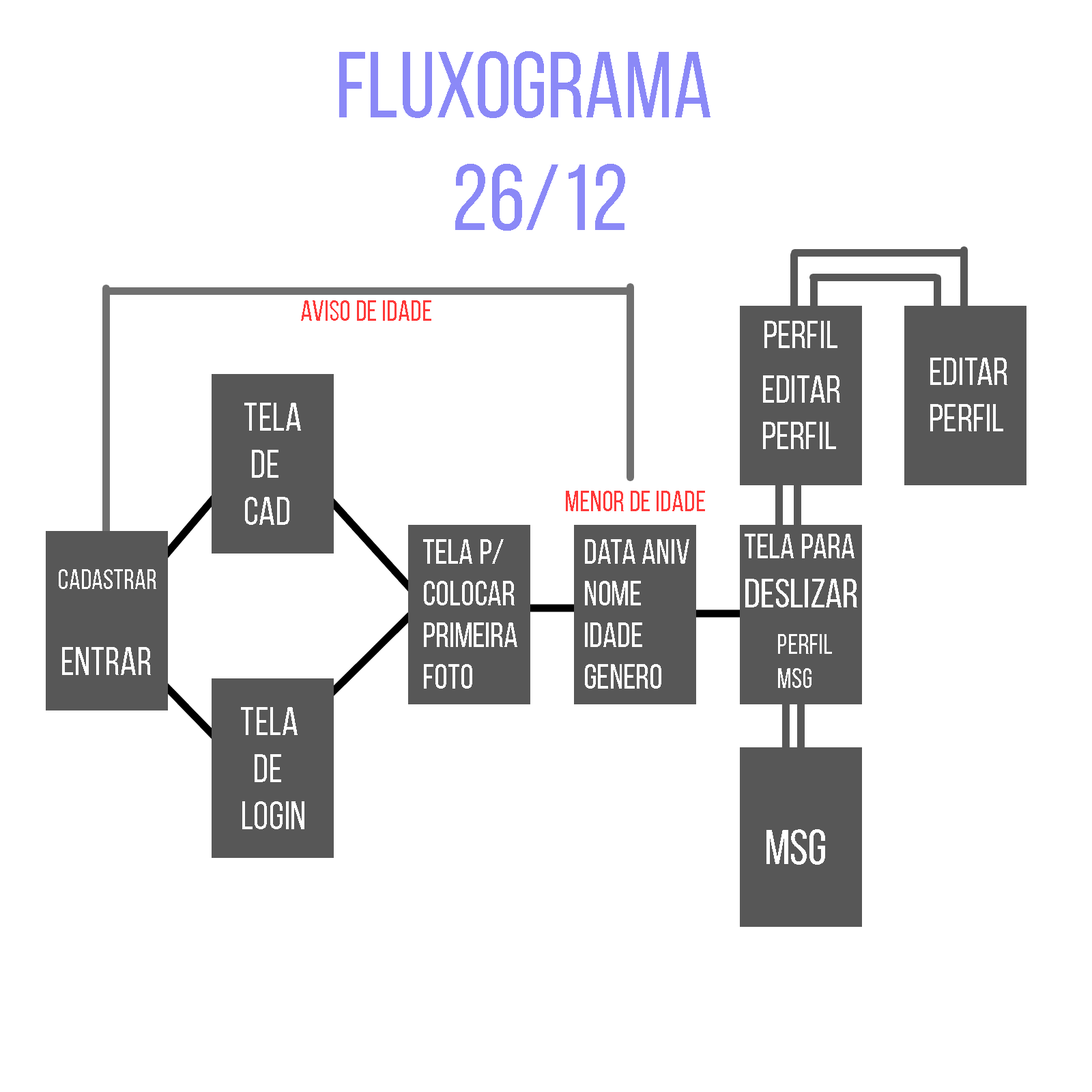
<style>
.page{position:relative;width:1092px;height:1092px;background:#ffffff}
.page>*{position:absolute;margin:0}
.t1{font:93.9px "BebasNeueRegular";color:#8b89f7}
.t2{font:29.1px "BebasNeueRegular";color:#ff3838}
.t3{font:38.6px "BebasNeueRegular";color:#ffffff}
.t4{font:39.3px "BebasNeueRegular";color:#ffffff}
.t5{font:34.5px "BebasNeueRegular";color:#ffffff}
.t6{font:40.7px "BebasNeueRegular";color:#ffffff}
.t7{font:27.7px "BebasNeueRegular";color:#ffffff}
.t8{font:28.4px "BebasNeueRegular";color:#ffffff}
.t9{font:48.9px "BebasNeueRegular";color:#ffffff}
</style>
<div class="page">
<p class="t1" style="left:339px;top:51px;width:371px;height:180px">fluxograma<br>        26/12</p>
<p class="t2" style="left:301px;top:300px;width:130px;height:21px">aviso de idade</p>
<p class="t3" style="left:764px;top:321px;width:73px;height:27px">PERFIL</p>
<p class="t3" style="left:930px;top:358px;width:77px;height:73px">EDITAR<br>PERFIL</p>
<p class="t3" style="left:763px;top:375px;width:77px;height:74px">EDITAR <br>PERFIL</p>
<p class="t4" style="left:244px;top:403px;width:57px;height:122px">tela<br> de<br>cad</p>
<p class="t2" style="left:566px;top:491px;width:139px;height:20px">Menor de idade</p>
<p class="t5" style="left:745px;top:534px;width:112px;height:73px">tela para<br><span class="t6">deslizar</span></p>
<p class="t5" style="left:423px;top:539px;width:94px;height:150px">tela p/<br>colocar<br>primeira<br>foto</p>
<p class="t5" style="left:585px;top:539px;width:104px;height:150px">data aniv<br>nome<br>idade<br>genero</p>
<p class="t7" style="left:59px;top:569px;width:97px;height:20px">CADASTRAR</p>
<p class="t8" style="left:778px;top:634px;width:54px;height:54px">Perfil<br>msg</p>
<p class="t4" style="left:62px;top:647px;width:89px;height:28px">entrar</p>
<p class="t4" style="left:241px;top:707px;width:63px;height:122px">tela <br>  de<br>login</p>
<p class="t9" style="left:766px;top:829px;width:59px;height:36px">MSG</p>
</div>
